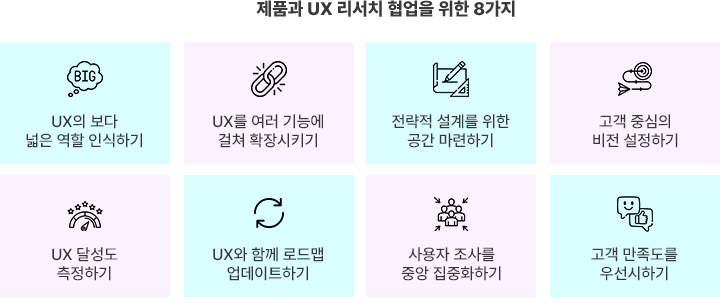
<style>
.page{position:relative;width:720px;height:303px;background:#dafeff}
.page>*{position:absolute;margin:0}
.t1{font:18px "Pretendard-ExtraBold";color:#393939;text-transform:uppercase}
.t2{font:16px "Pretendard-Medium";color:#373737;text-transform:uppercase}
</style>
<div class="page">
<p class="t1" style="left:256px;top:0px;width:259px;height:17px">제품과 UX 리서치 협업을 위한 8가지</p>
<p class="t2" style="left:26px;top:114px;width:116px;height:34px;text-align:center">UX의 보다<br>넓은 역할 인식하기</p>
<p class="t2" style="left:213px;top:114px;width:110px;height:34px;text-align:center">UX를 여러 기능에<br>걸쳐 확장시키기</p>
<p class="t2" style="left:392px;top:114px;width:118px;height:34px;text-align:center">전략적 설계를 위한<br>공간 마련하기</p>
<p class="t2" style="left:593px;top:114px;width:85px;height:34px;text-align:center">고객 중심의<br>비전 설정하기</p>
<p class="t2" style="left:52px;top:247px;width:66px;height:34px;text-align:center">UX 달성도<br>측정하기</p>
<p class="t2" style="left:213px;top:247px;width:110px;height:34px;text-align:center">UX와 함께 로드맵<br>업데이트하기</p>
<p class="t2" style="left:401px;top:247px;width:100px;height:34px;text-align:center">사용자 조사를<br>중앙 집중화하기</p>
<p class="t2" style="left:591px;top:247px;width:87px;height:34px;text-align:center">고객 만족도를<br>우선시하기</p>
</div>
